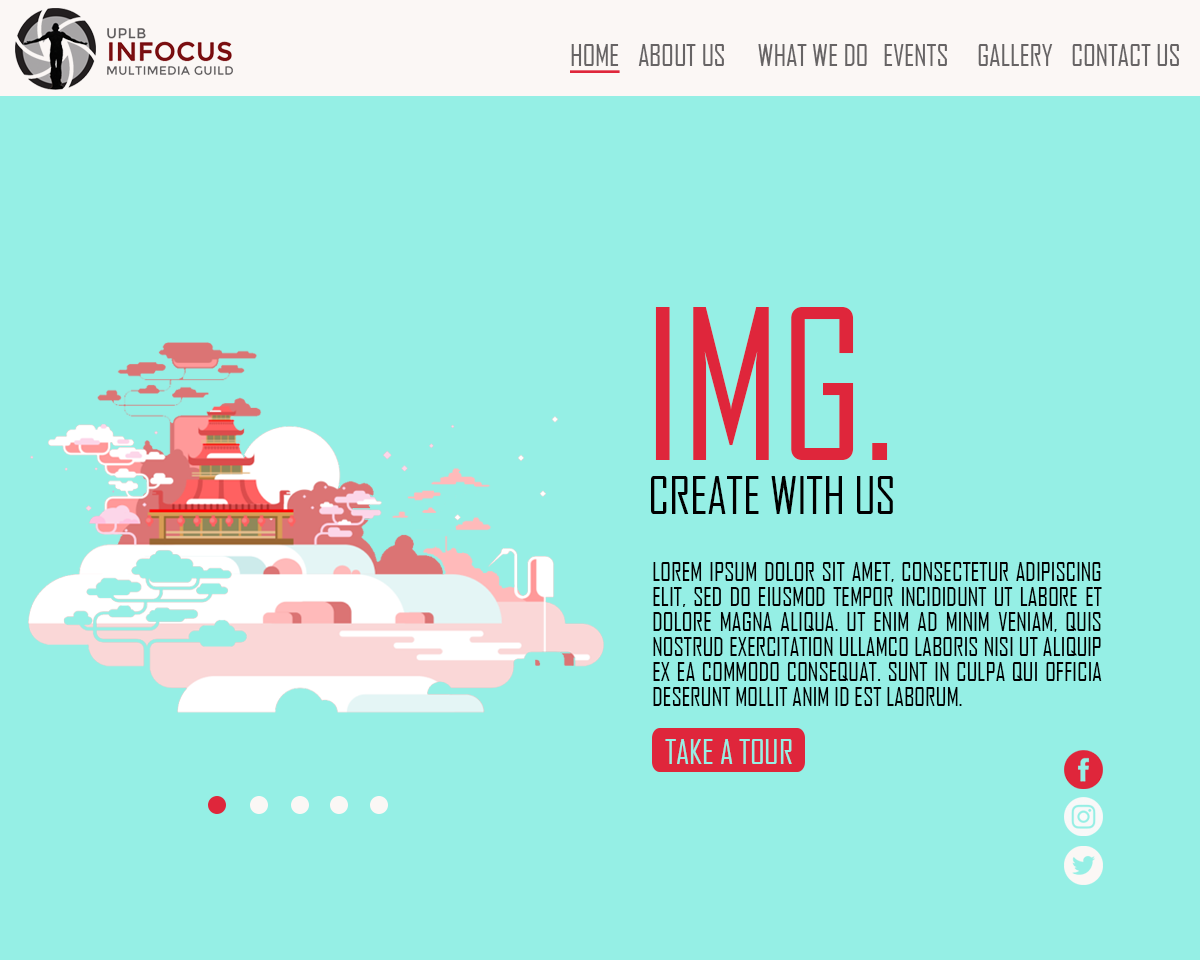
<style>
.page{position:relative;width:1200px;height:960px;background:#95efe5}
.page>*{position:absolute;margin:0}
.t1{font:29.3px "AgencyFB-Reg";letter-spacing:-0.01em;color:#676465;text-transform:uppercase}
.t2{font:200px "AgencyFB-Reg";letter-spacing:-0.01em;color:#df263b;text-transform:uppercase}
.t3{font:50px "AgencyFB-Reg";letter-spacing:-0.01em;color:#000000;text-transform:uppercase}
.t4{font:25px/25px "AgencyFB-Reg";letter-spacing:-0.01em;color:#000000;text-transform:uppercase}
.t5{font:33.3px "AgencyFB-Reg";letter-spacing:-0.01em;color:#95efe5;text-transform:uppercase}
</style>
<div class="page">
<p class="t1" style="left:571px;top:44px;width:608px;height:22px">home   about us  what we do  events gallery contact us</p>
<p class="t2" style="left:655px;top:307px;width:233px;height:153px">IMG.</p>
<p class="t3" style="left:651px;top:476px;width:242px;height:38px">create with us</p>
<p class="t4" style="left:653px;top:562px;width:449px;height:144px;text-align:justify">Lorem ipsum dolor sit amet, consectetur adipiscing elit, sed do eiusmod tempor incididunt ut labore et dolore magna aliqua. Ut enim ad minim veniam, quis nostrud exercitation ullamco laboris nisi ut aliquip ex ea commodo consequat. sunt in culpa qui officia deserunt mollit anim id est laborum.</p>
<p class="t5" style="left:665px;top:739px;width:127px;height:25px">take a tour</p>
</div>
